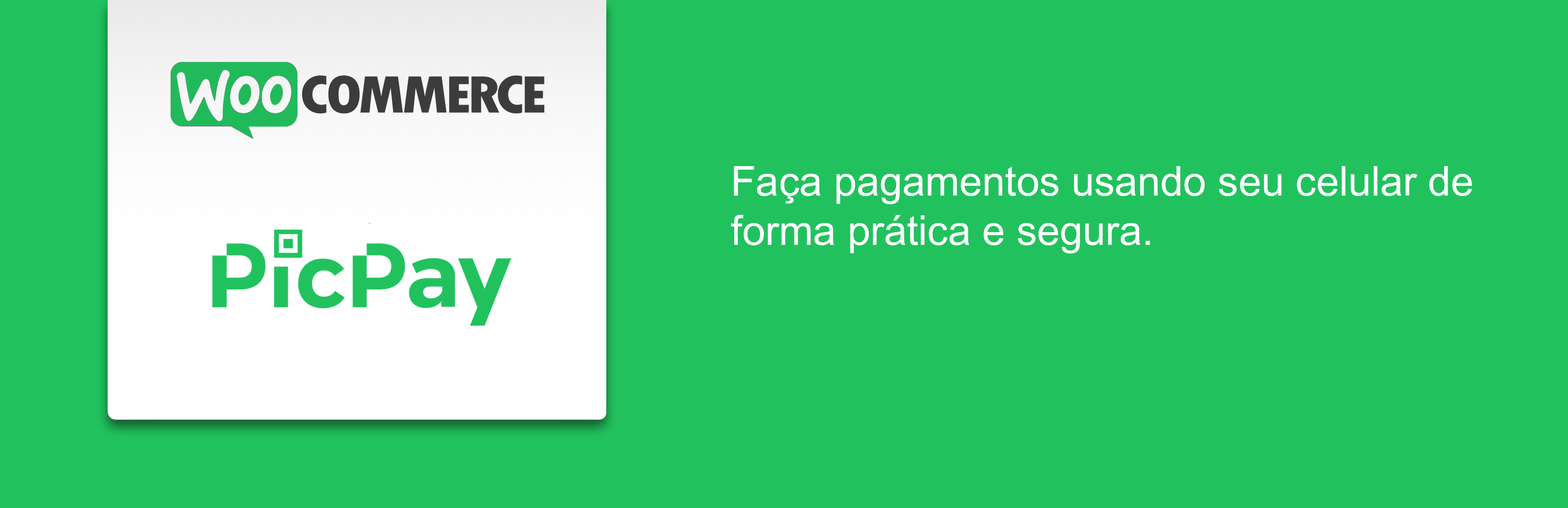
<style>
.page{position:relative;width:1568px;height:508px;background:#21c25e}
.page>*{position:absolute;margin:0}
.t1{font:41.1px "DokChampa";color:#ffffff}
</style>
<div class="page">
<p class="t1" style="left:731px;top:166px;width:741px;height:87px">Faça pagamentos usando seu celular de forma prática e segura.</p>
</div>
